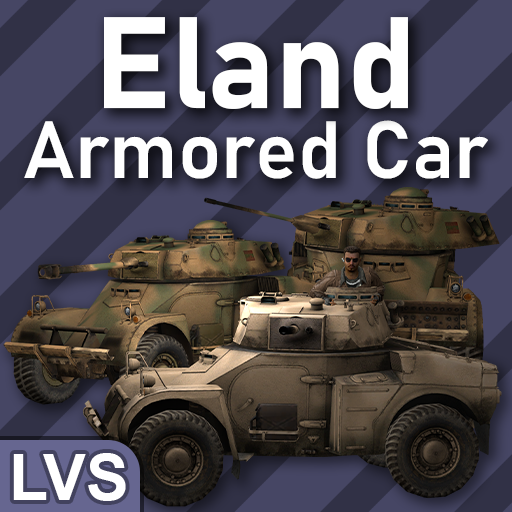
<style>
.page{position:relative;width:512px;height:512px}
.page>*{position:absolute;margin:0}
.t1{font:128px "Bahnschrift-Bold";color:#ffffff}
.t2{font:80px "Bahnschrift-SemiBold";color:#ffffff}
.t3{font:64px "Arial-BoldMT";color:#ffffff}
</style>
<div class="page">
<p class="t1" style="left:104px;top:17px;width:304px;height:92px">Eland</p>
<p class="t2" style="left:24px;top:120px;width:464px;height:59px">Armored Car</p>
<p class="t3" style="left:13px;top:453px;width:113px;height:48px">LVS</p>
</div>
